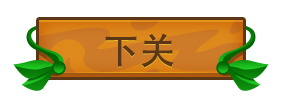
<style>
.page{position:relative;width:287px;height:103px;background:#ffffff}
.page>*{position:absolute;margin:0}
.t1{font:36px "AdobeHeitiStd-Regular";letter-spacing:0.025em;color:#5b3716}
</style>
<div class="page">
<p class="t1" style="left:105px;top:33px;width:69px;height:35px">下关</p>
</div>
